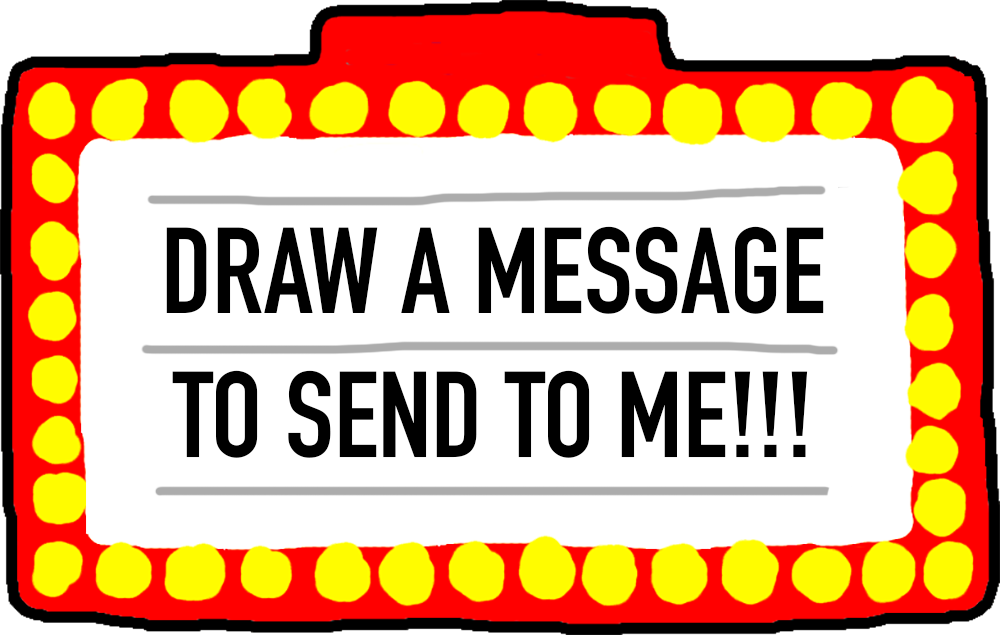
<style>
.page{position:relative;width:1000px;height:635px;background:#ffffff}
.page>*{position:absolute;margin:0}
.t1{font:120px "DINCondensed-Bold";color:#000000}
</style>
<div class="page">
<p class="t1" style="left:166px;top:226px;width:658px;height:232px;text-align:center">DRAW A MESSAGE TO SEND TO ME!!!</p>
</div>
